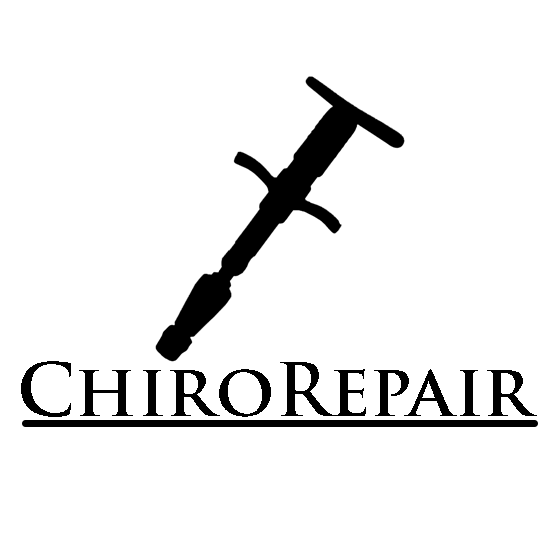
<style>
.page{position:relative;width:560px;height:560px;background:#ffffff}
.page>*{position:absolute;margin:0}
.t1{font:72px "TrajanPro-Bold";color:#000000}
</style>
<div class="page">
<p class="t1" style="left:21px;top:361px;width:516px;height:56px">ChiroRepair</p>
</div>
